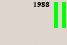
<style>
.page{position:relative;width:67px;height:45px;background:#ded6ce}
.page>*{position:absolute;margin:0}
.t1{font:10.3px "Aparajita-Bold";color:#000000}
</style>
<div class="page">
<p class="t1" style="left:33px;top:2px;width:17px;height:5px">1988</p>
</div>
